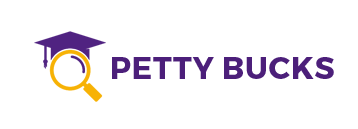
<style>
.page{position:relative;width:358px;height:129px;background:#ffffff}
.page>*{position:absolute;margin:0}
.t1{font:31px "Montserrat-Bold";letter-spacing:0.02em;color:#4c1f7a;text-transform:uppercase}
</style>
<div class="page">
<p class="t1" style="left:112px;top:57px;width:222px;height:22px">Petty Bucks</p>
</div>
